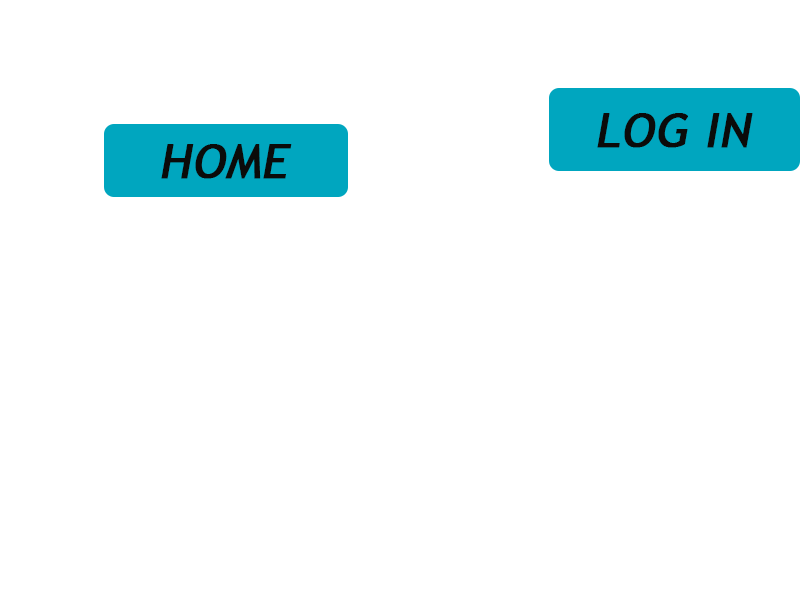
<style>
.page{position:relative;width:800px;height:600px;background:#ffffff}
.page>*{position:absolute;margin:0}
.t1{font:48px "TrebuchetMS";color:#0b0b0a;font-weight:bold;font-style:italic}
</style>
<div class="page">
<p class="t1" style="left:597px;top:113px;width:156px;height:35px">LOG IN</p>
<p class="t1" style="left:161px;top:144px;width:131px;height:35px">HOME</p>
</div>
